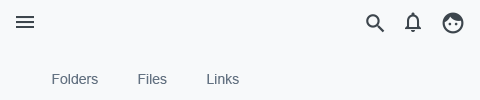
<style>
.page{position:relative;width:480px;height:100px;background:#f7f9fa}
.page>*{position:absolute;margin:0}
.t1{font:14px "ArialMT";color:#637282}
</style>
<div class="page">
<p class="t1" style="left:52px;top:74px;width:46px;height:10px">Folders</p>
<p class="t1" style="left:138px;top:74px;width:29px;height:10px">Files</p>
<p class="t1" style="left:207px;top:74px;width:32px;height:10px">Links</p>
</div>
